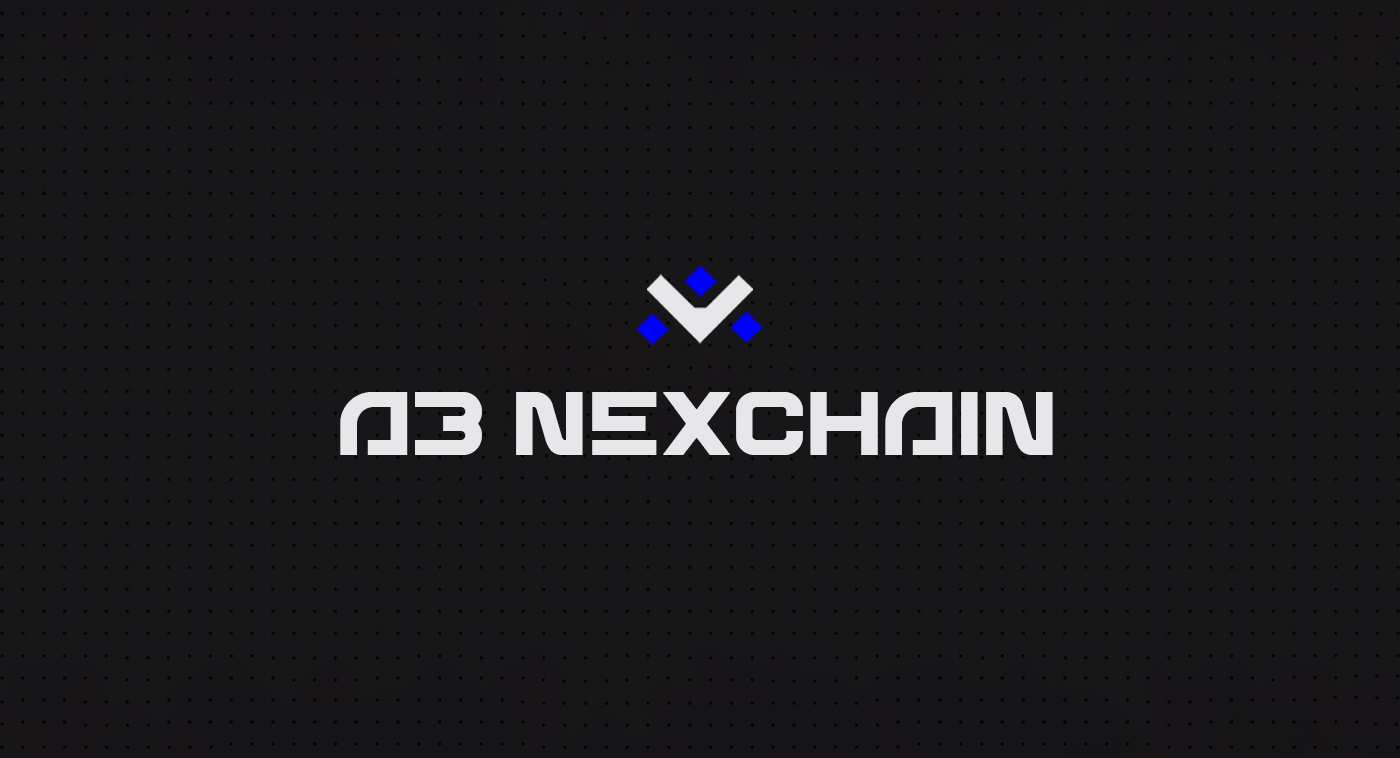
<style>
.page{position:relative;width:1400px;height:758px;background:#171618}
.page>*{position:absolute;margin:0}
.t1{font:82.1px "Airbeat";color:#e7e6e9;font-weight:bold}
</style>
<div class="page">
<p class="t1" style="left:340px;top:392px;width:713px;height:63px">A3 NEXCHAIN</p>
</div>
